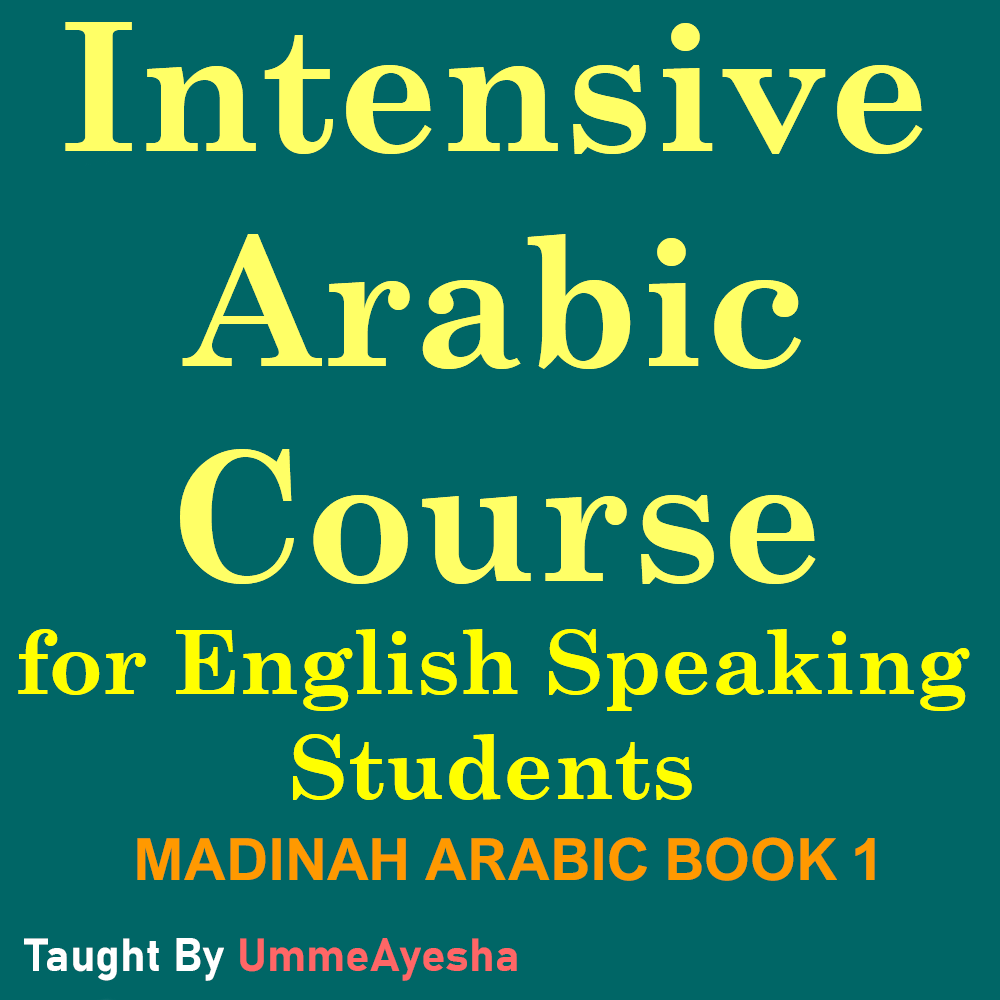
<style>
.page{position:relative;width:1000px;height:1000px;background:#006666}
.page>*{position:absolute;margin:0}
.t1{font:179.2px "CenturySchoolbook-Bold";color:#ffff66}
.t2{font:87.5px "CenturySchoolbook-Bold";color:#ffff00}
.t3{font:58.3px "ArialNova-Bold";color:#ff9900}
.t4{font:45.8px "Bahnschrift-Bold";color:#ff6666}
.t5{font:45.8px "Bahnschrift-Bold";color:#ffffff}
</style>
<div class="page">
<p class="t1" style="left:65px;top:22px;width:858px;height:562px;text-align:center">Intensive<br>Arabic<br>Course</p>
<p class="t2" style="left:18px;top:629px;width:952px;height:171px;text-align:center">for English Speaking Students</p>
<p class="t3" style="left:137px;top:837px;width:738px;height:44px">MADINAH ARABIC BOOK 1</p>
<p class="t4" style="left:24px;top:938px;width:493px;height:43px"><span class="t5">Taught By </span>UmmeAyesha</p>
</div>
